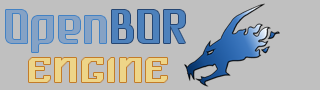
<style>
.page{position:relative;width:320px;height:90px;background:#c0c0c0}
.page>*{position:absolute;margin:0}
.t1{font:48px "Dukungan";letter-spacing:0.05em;color:#85a2c5}
.t2{font:48px "Dukungan";letter-spacing:0.05em;color:#4d81bc}
.t3{font:48px "Angular";letter-spacing:0.05em;color:#eed588}
</style>
<div class="page">
<p class="t1" style="left:6px;top:10px;width:100px;height:42px">Open</p>
<p class="t2" style="left:112px;top:10px;width:73px;height:33px">BOR</p>
<p class="t3" style="left:29px;top:58px;width:138px;height:24px">Engine</p>
</div>
